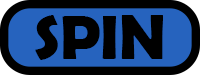
<style>
.page{position:relative;width:200px;height:75px;background:#000000}
.page>*{position:absolute;margin:0}
.t1{font:62.5px "BerlinSansFBDemi-Bold";color:#000000}
</style>
<div class="page">
<p class="t1" style="left:35px;top:15px;width:128px;height:45px">SPIN</p>
</div>
